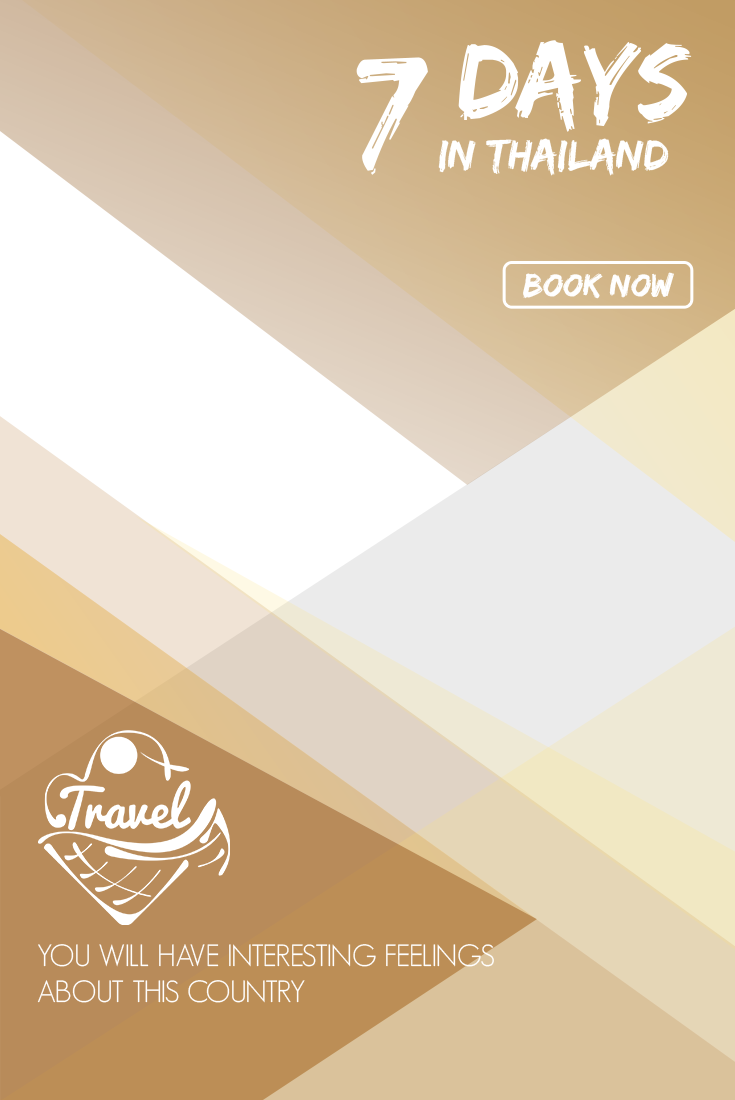
<style>
.page{position:relative;width:735px;height:1100px}
.page>*{position:absolute;margin:0}
.t1{font:110px "EdoSZ";color:#ffffff;text-transform:uppercase}
.t2{font:150px "EdoSZ";color:#ffffff;text-transform:uppercase}
.t3{font:44px "EdoSZ";color:#ffffff;text-transform:uppercase}
.t4{font:33px "EdoSZ";color:#ffffff}
.t5{font:30px "GeosansLight";color:#ffffff;text-transform:uppercase}
</style>
<div class="page">
<p class="t1" style="left:458px;top:40px;width:234px;height:92px">Days</p>
<p class="t2" style="left:356px;top:57px;width:72px;height:118px">7</p>
<p class="t3" style="left:438px;top:138px;width:231px;height:38px">in Thailand</p>
<p class="t4" style="left:523px;top:272px;width:151px;height:27px">Book now</p>
<p class="t5" style="left:37px;top:944px;width:457px;height:59px">You will have interesting feelings<br>about this country</p>
</div>
